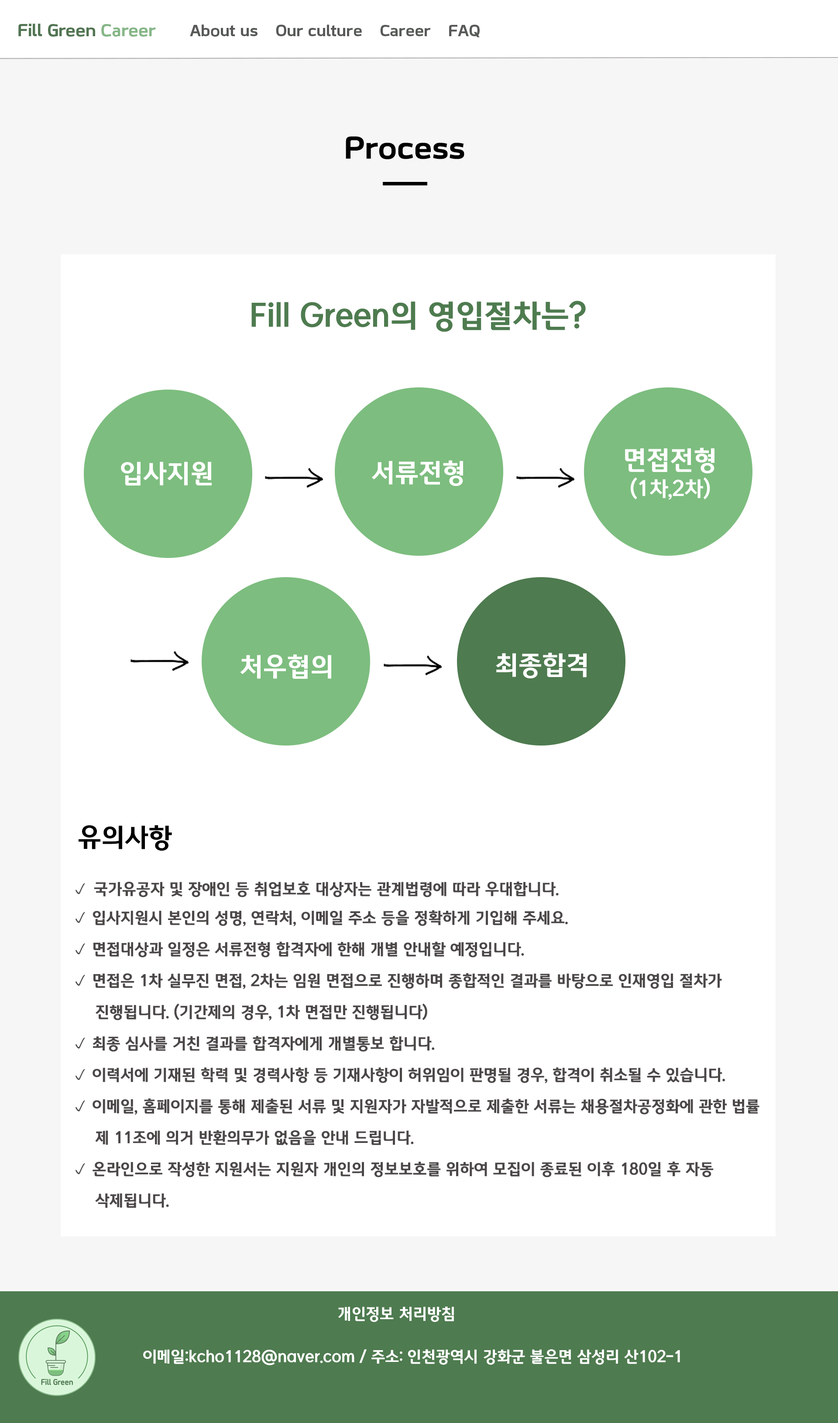
<style>
.page{position:relative;width:838px;height:1423px;background:#ffffff}
.page>*{position:absolute;margin:0}
.t1{font:17.5px "KOFIHDrLEEJWOTF-B";color:#517552}
.t2{font:17.5px "KOFIHDrLEEJWOTF-B";color:#86b687}
.t3{font:16.1px "KOFIHDrLEEJWOTF-B";color:#575a57}
.t4{font:31.4px "KOFIHDrLEEJWOTF-B";color:#000000}
.t5{font:31.4px "MICEGothicOTFBold";color:#4e7b4f}
.t6{font:20.9px/31.4px "MICEGothicOTFBold";color:#ffffff}
.t7{font:26.2px/31.4px "MICEGothicOTFBold";color:#ffffff}
.t8{font:26.2px "MICEGothicOTFBold";color:#ffffff}
.t9{font:26.2px "MICEGothicOTFBold";color:#000000}
.t10{font:15.7px/31.4px "MICEGothicOTFBold";color:#4c4848}
.t11{font:15.7px/31.4px "BookshelfSymbolSeven";color:#4c4848}
.t12{font:15.7px "MICEGothicOTFBold";color:#ffffff}
</style>
<div class="page">
<p class="t1" style="left:18px;top:24px;width:138px;height:13px">Fill Green <span class="t2">Career</span></p>
<p class="t3" style="left:190px;top:24px;width:290px;height:14px">About us    Our culture    Career    FAQ</p>
<p class="t4" style="left:346px;top:136px;width:118px;height:23px">Process</p>
<p class="t5" style="left:251px;top:301px;width:335px;height:31px">Fill Green의 영입절차는?</p>
<p class="t6" style="left:625px;top:448px;width:89px;height:52px;text-align:center"><span class="t7">면접전형<br></span>(1차,2차)</p>
<p class="t8" style="left:121px;top:462px;width:91px;height:24px">입사지원</p>
<p class="t8" style="left:371px;top:460px;width:92px;height:26px">서류전형</p>
<p class="t8" style="left:496px;top:653px;width:90px;height:26px">최종합격</p>
<p class="t8" style="left:240px;top:655px;width:91px;height:24px">처우협의</p>
<p class="t9" style="left:79px;top:825px;width:93px;height:26px">유의사항</p>
<p class="t10" style="left:75px;top:881px;width:684px;height:327px"><span class="t11">p </span>국가유공자 및 장애인 등 취업보호 대상자는 관계법령에 따라 우대합니다.<br><span class="t11">p </span>입사지원시 본인의 성명, 연락처, 이메일 주소 등을 정확하게 기입해 주세요.<br><span class="t11">p </span>면접대상과 일정은 서류전형 합격자에 한해 개별 안내할 예정입니다.<br><span class="t11">p </span>면접은 1차 실무진 면접, 2차는 임원 면접으로 진행하며 종합적인 결과를 바탕으로 인재영입 절차가 <br>     진행됩니다. (기간제의 경우, 1차 면접만 진행됩니다)<br><span class="t11">p </span>최종 심사를 거친 결과를 합격자에게 개별통보 합니다.<br><span class="t11">p </span>이력서에 기재된 학력 및 경력사항 등 기재사항이 허위임이 판명될 경우, 합격이 취소될 수 있습니다.<br><span class="t11">p </span>이메일, 홈페이지를 통해 제출된 서류 및 지원자가 자발적으로 제출한 서류는 채용절차공정화에 관한 법률 <br>     제 11조에 의거 반환의무가 없음을 안내 드립니다.<br><span class="t11">p </span>온라인으로 작성한 지원서는 지원자 개인의 정보보호를 위하여 모집이 종료된 이후 180일 후 자동 <br>     삭제됩니다.</p>
<p class="t12" style="left:338px;top:1307px;width:116px;height:16px">개인정보 처리방침</p>
<p class="t12" style="left:143px;top:1350px;width:537px;height:16px">이메일:kcho1128@naver.com / 주소: 인천광역시 강화군 불은면 삼성리 산102-1</p>
</div>
